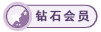
<style>
.page{position:relative;width:101px;height:32px;background:#ffffff}
.page>*{position:absolute;margin:0}
.t1{font:12px "SimHei";letter-spacing:0.2em;color:#563a70;font-weight:bold}
</style>
<div class="page">
<p class="t1" style="left:35px;top:10px;width:55px;height:12px">钻石会员</p>
</div>
